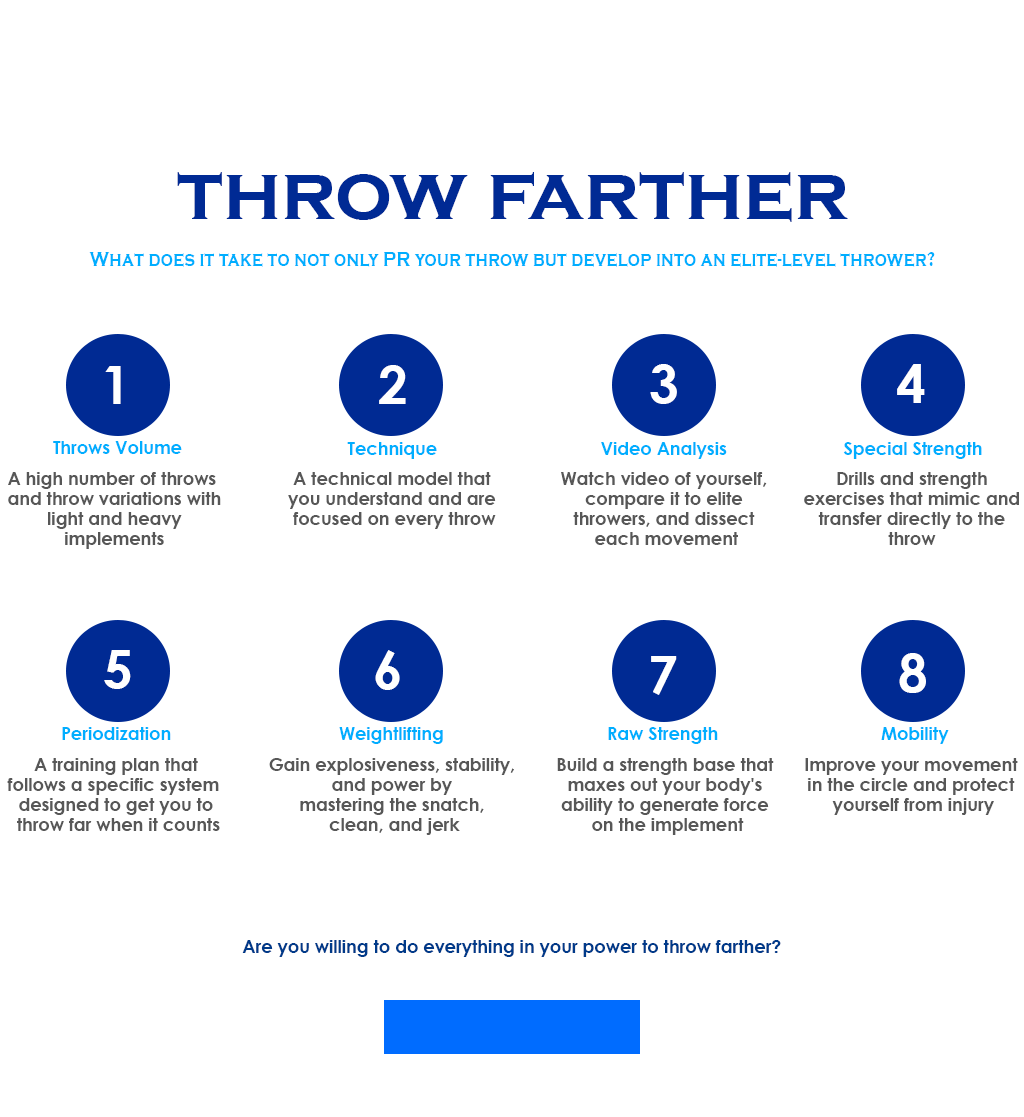
<style>
.page{position:relative;width:1024px;height:1117px;background:#ffffff}
.page>*{position:absolute;margin:0}
.t1{font:80px "CopperplateGothic-Bold";color:#002a94}
.t2{font:21.9px "CopperplateGothic-Bold";color:#00aeff;scale:0.8 1}
.t3{font:53.3px "CenturyGothic-Bold";color:#ffffff}
.t4{font:17.8px "CenturyGothic-Bold";color:#00aeff}
.t5{font:17.8px/20px "CenturyGothic-Bold";color:#575757}
.t6{font:17.8px "CenturyGothic-Bold";color:#003a89}
</style>
<div class="page">
<p class="t1" style="left:177px;top:172px;width:671px;height:50px">throw farther</p>
<p class="t2" style="left:89px;top:252px;width:846px;height:15px">What does it take to not only PR your throw but develop into an elite-level thrower?</p>
<p class="t3" style="left:105px;top:366px;width:16px;height:38px">1</p>
<p class="t3" style="left:379px;top:365px;width:27px;height:39px">2</p>
<p class="t3" style="left:650px;top:364px;width:27px;height:40px">3</p>
<p class="t3" style="left:897px;top:364px;width:28px;height:39px">4</p>
<p class="t4" style="left:53px;top:441px;width:129px;height:13px">Throws Volume</p>
<p class="t4" style="left:347px;top:442px;width:90px;height:17px">Technique</p>
<p class="t4" style="left:601px;top:442px;width:126px;height:17px">Video Analysis</p>
<p class="t4" style="left:843px;top:442px;width:139px;height:17px">Special Strength</p>
<p class="t5" style="left:8px;top:472px;width:213px;height:77px;text-align:center">A high number of throws <br>and throw variations with<br> light and heavy <br>implements</p>
<p class="t5" style="left:288px;top:472px;width:208px;height:57px;text-align:center">A technical model that <br>you understand and are <br>focused on every throw</p>
<p class="t5" style="left:561px;top:472px;width:206px;height:73px;text-align:center">Watch video of yourself, <br>compare it to elite <br>throwers, and dissect <br>each movement</p>
<p class="t5" style="left:804px;top:472px;width:215px;height:73px;text-align:center">Drills and strength <br>exercises that mimic and <br>transfer directly to the <br>throw</p>
<p class="t3" style="left:104px;top:650px;width:27px;height:39px">5</p>
<p class="t3" style="left:375px;top:650px;width:25px;height:40px">6</p>
<p class="t3" style="left:899px;top:653px;width:27px;height:40px">8</p>
<p class="t3" style="left:651px;top:656px;width:26px;height:39px">7</p>
<p class="t4" style="left:62px;top:727px;width:109px;height:13px">Periodization</p>
<p class="t4" style="left:339px;top:727px;width:104px;height:17px">Weightlifting</p>
<p class="t4" style="left:608px;top:727px;width:110px;height:17px">Raw Strength</p>
<p class="t4" style="left:881px;top:727px;width:68px;height:17px">Mobility</p>
<p class="t5" style="left:7px;top:758px;width:213px;height:73px;text-align:center">A training plan that <br>follows a specific system  <br>designed to get you to <br>throw far when it counts</p>
<p class="t5" style="left:269px;top:758px;width:245px;height:77px;text-align:center">Gain explosiveness, stability, <br>and power by <br>mastering the snatch, <br>clean, and jerk</p>
<p class="t5" style="left:557px;top:758px;width:217px;height:77px;text-align:center">Build a strength base that <br>maxes out your body's <br>ability to generate force <br>on the implement</p>
<p class="t5" style="left:805px;top:758px;width:213px;height:57px;text-align:center">Improve your movement <br>in the circle and protect <br>yourself from injury</p>
<p class="t6" style="left:242px;top:940px;width:539px;height:17px">Are you willing to do everything in your power to throw farther?</p>
</div>
